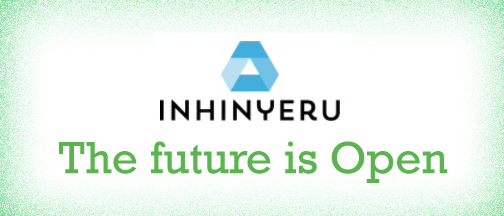
<style>
.page{position:relative;width:504px;height:216px;background:#ffffff}
.page>*{position:absolute;margin:0}
.t1{font:46px "Rockwell";color:#5bb54f}
</style>
<div class="page">
<p class="t1" style="left:59px;top:141px;width:389px;height:42px">The future is Open</p>
</div>
